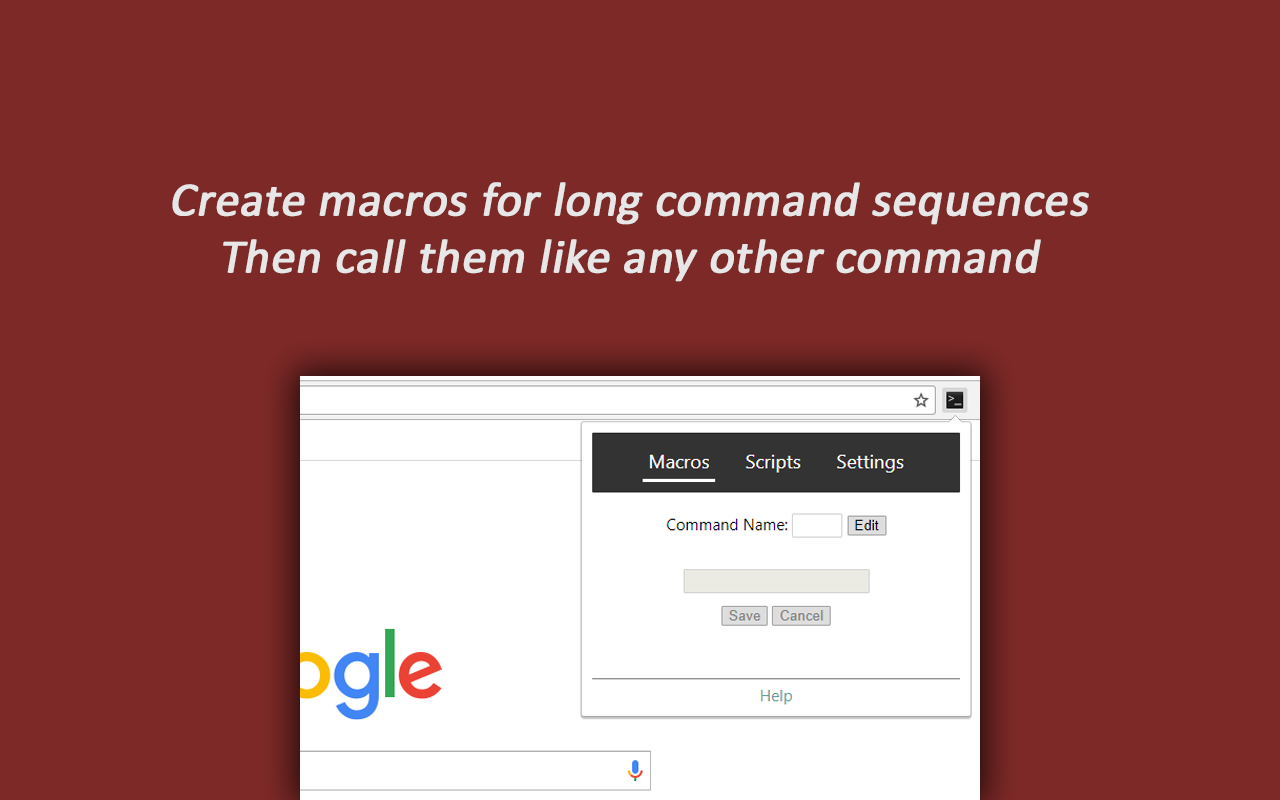
<style>
.page{position:relative;width:1280px;height:800px;background:#7d2927}
.page>*{position:absolute;margin:0}
.t1{font:48px "Calibri";color:#e7e7e7;font-weight:bold;font-style:italic}
</style>
<div class="page">
<p class="t1" style="left:172px;top:182px;width:917px;height:100px;text-align:center">Create macros for long command sequences<br>Then call them like any other command</p>
</div>
